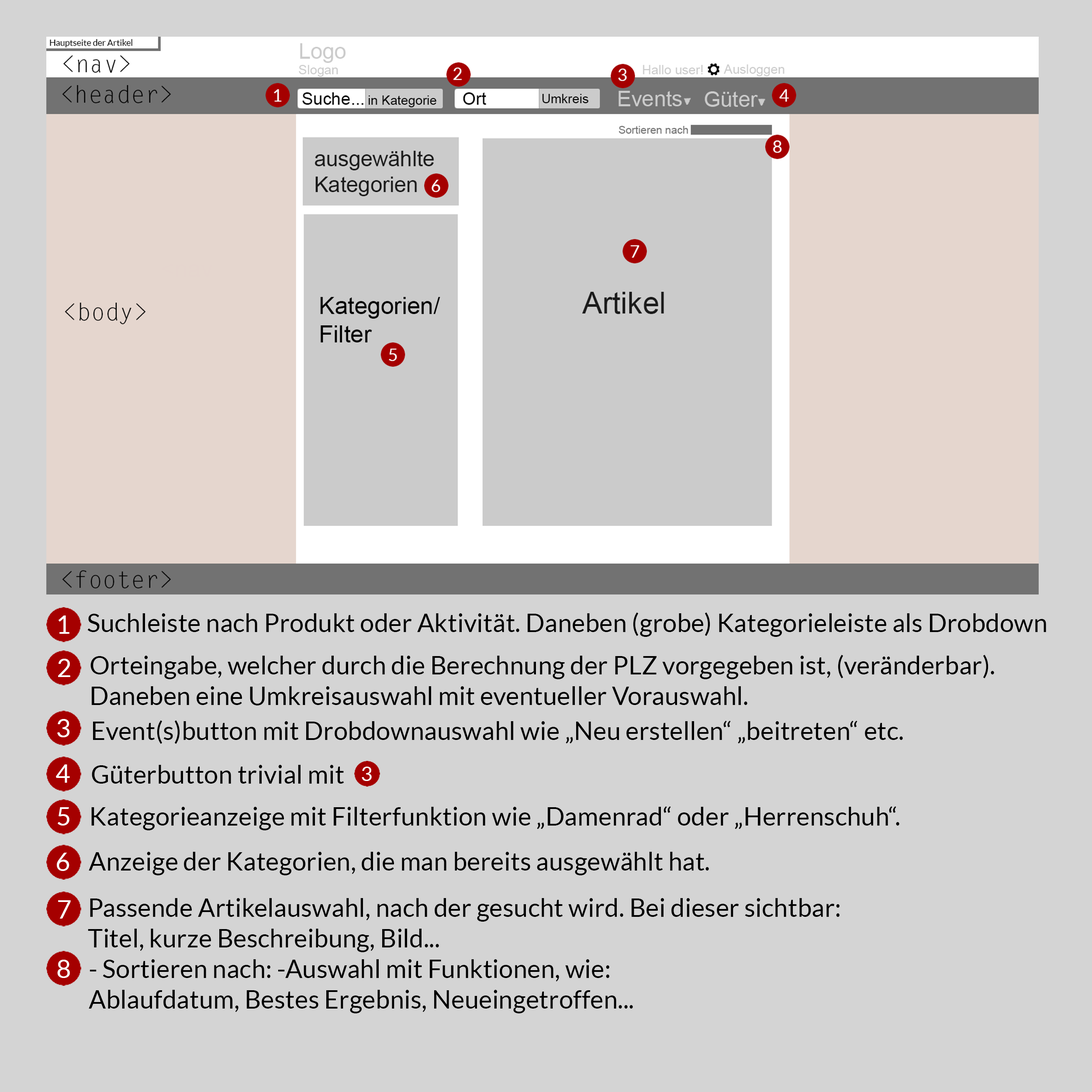
<style>
.page{position:relative;width:1092px;height:1092px;background:#d4d4d4}
.page>*{position:absolute;margin:0}
.t1{font:25.5px "Lato-Regular";color:#ffffff}
.t2{font:25.5px "Lato-Regular";color:#000000}
.t3{font:20px "Lato-Regular";color:#ffffff}
</style>
<div class="page">
<p class="t1" style="left:58px;top:615px;width:11px;height:19px">1</p>
<p class="t2" style="left:87px;top:612px;width:959px;height:25px">Suchleiste nach Produkt oder Aktivität. Daneben (grobe) Kategorieleiste als Drobdown</p>
<p class="t1" style="left:58px;top:659px;width:12px;height:18px">2</p>
<p class="t2" style="left:90px;top:655px;width:904px;height:50px">Orteingabe, welcher durch die Berechnung der PLZ vorgegeben ist, (veränderbar).<br>Daneben eine Umkreisauswahl mit eventueller Vorauswahl.</p>
<p class="t1" style="left:57px;top:719px;width:13px;height:18px">3</p>
<p class="t2" style="left:93px;top:720px;width:810px;height:24px">Event(s)button mit Drobdownauswahl wie „Neu erstellen“ „beitreten“ etc.</p>
<p class="t1" style="left:56px;top:764px;width:14px;height:19px">4</p>
<p class="t2" style="left:92px;top:765px;width:252px;height:19px">Güterbutton trivial mit</p>
<p class="t3" style="left:362px;top:767px;width:10px;height:14px">3</p>
<p class="t1" style="left:58px;top:807px;width:11px;height:19px">5</p>
<p class="t2" style="left:91px;top:806px;width:808px;height:24px">Kategorieanzeige mit Filterfunktion wie „Damenrad“ oder „Herrenschuh“.</p>
<p class="t1" style="left:57px;top:853px;width:12px;height:18px">6</p>
<p class="t2" style="left:89px;top:852px;width:620px;height:23px">Anzeige der Kategorien, die man bereits ausgewählt hat.</p>
<p class="t1" style="left:58px;top:900px;width:13px;height:19px">7</p>
<p class="t2" style="left:88px;top:898px;width:752px;height:54px">Passende Artikelauswahl, nach der gesucht wird. Bei dieser sichtbar: <br>Titel, kurze Beschreibung, Bild...</p>
<p class="t1" style="left:57px;top:960px;width:13px;height:18px">8</p>
<p class="t2" style="left:89px;top:959px;width:544px;height:54px">- Sortieren nach: -Auswahl mit Funktionen, wie:<br>Ablaufdatum, Bestes Ergebnis, Neueingetroffen...</p>
</div>
